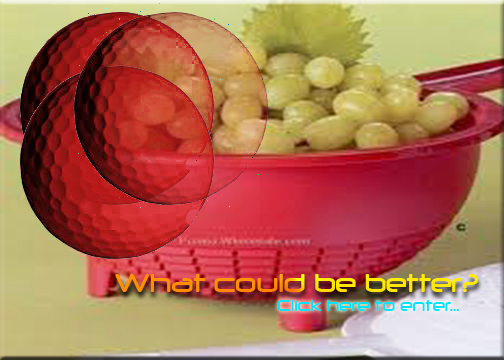
<style>
.page{position:relative;width:504px;height:360px}
.page>*{position:absolute;margin:0}
.t1{font:30px "Neuropol"}
.t2{font:18px "Neuropol";color:#00e4ff}
</style>
<div class="page">
<p class="t1" style="left:115px;top:274px;width:363px;height:18px">What could be better?</p>
<p class="t2" style="left:277px;top:300px;width:183px;height:11px">Click here to enter...</p>
</div>
